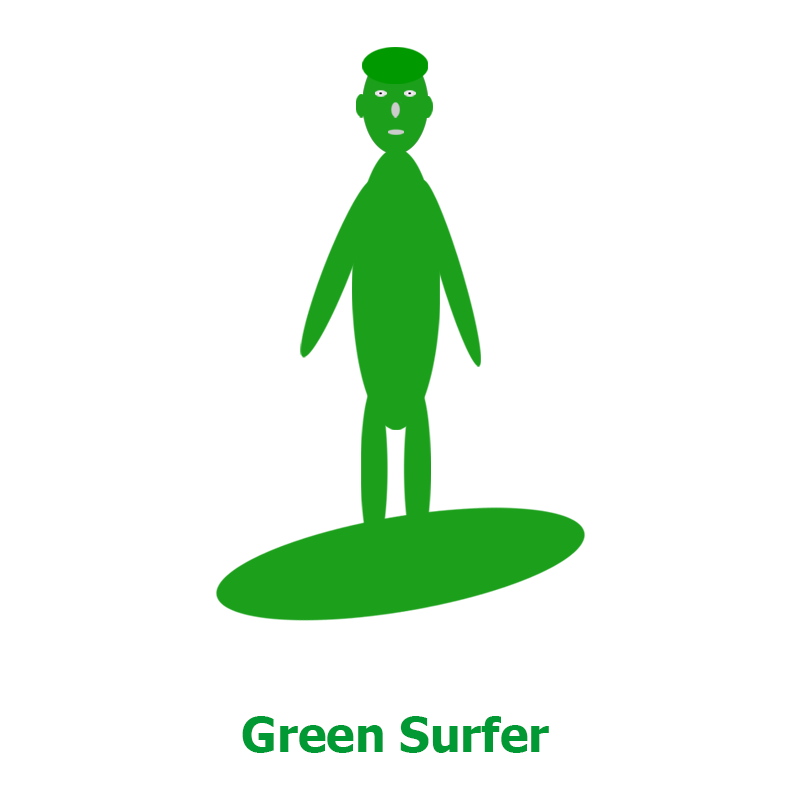
<style>
.page{position:relative;width:800px;height:800px;background:#ffffff}
.page>*{position:absolute;margin:0}
.t1{font:48px "Tahoma-Bold";color:#009933}
</style>
<div class="page">
<p class="t1" style="left:242px;top:716px;width:307px;height:37px">Green Surfer</p>
</div>
